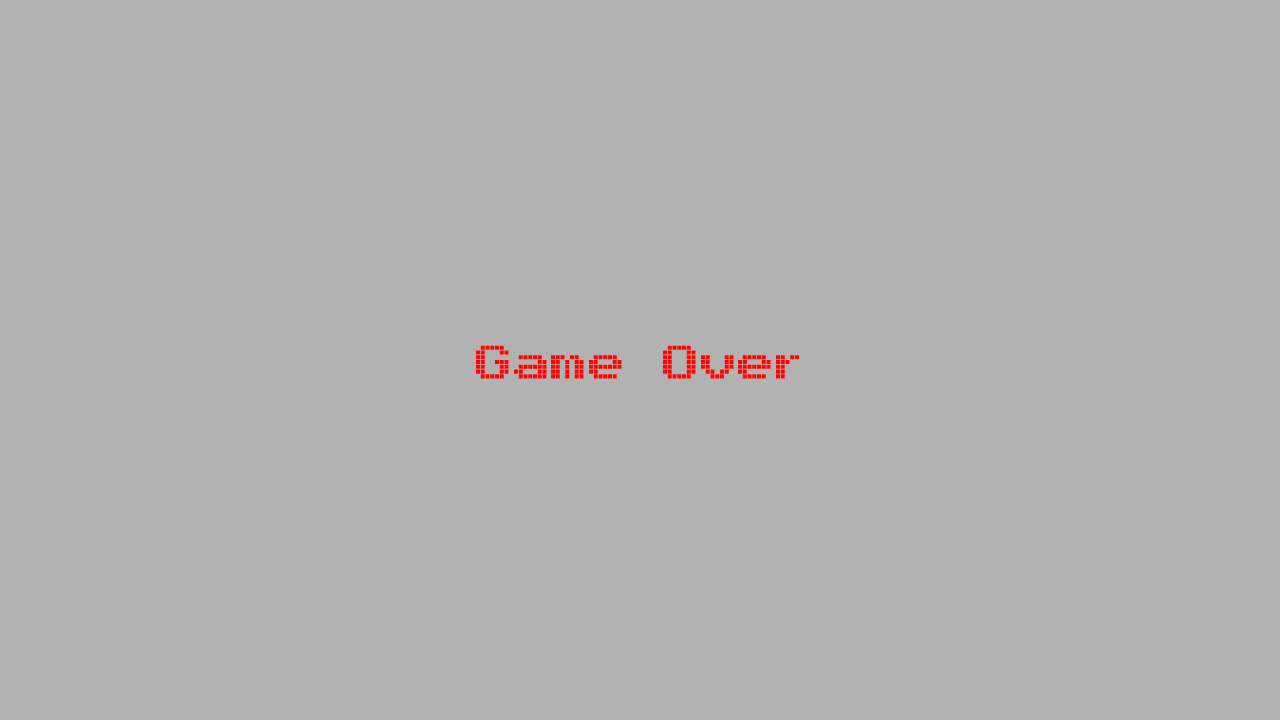
<style>
.page{position:relative;width:1280px;height:720px;background:#b2b2b2}
.page>*{position:absolute;margin:0}
.t1{font:72px "Arcade";color:#ff0202}
</style>
<div class="page">
<p class="t1" style="left:476px;top:345px;width:323px;height:34px">Game Over</p>
</div>
